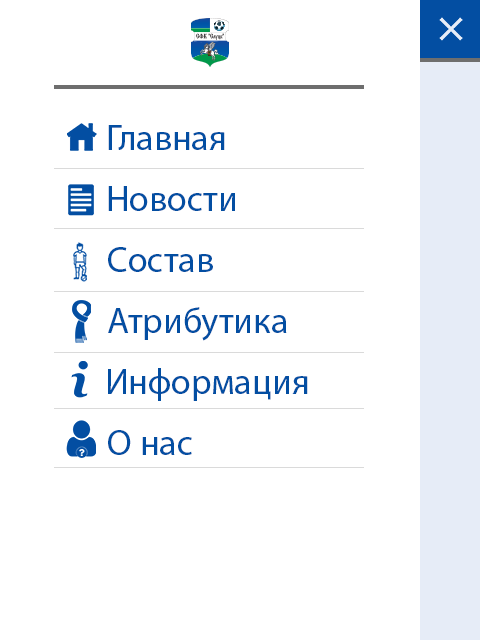
<style>
.page{position:relative;width:480px;height:640px;background:#ffffff}
.page>*{position:absolute;margin:0}
.t1{font:36px "MyriadPro-Regular";color:#034ea2}
</style>
<div class="page">
<p class="t1" style="left:108px;top:125px;width:117px;height:25px">Главная</p>
<p class="t1" style="left:108px;top:186px;width:127px;height:25px">Новости</p>
<p class="t1" style="left:108px;top:247px;width:105px;height:25px">Состав</p>
<p class="t1" style="left:108px;top:307px;width:179px;height:34px">Атрибутика</p>
<p class="t1" style="left:108px;top:368px;width:200px;height:33px">Информация</p>
<p class="t1" style="left:108px;top:430px;width:84px;height:25px">О нас</p>
</div>
